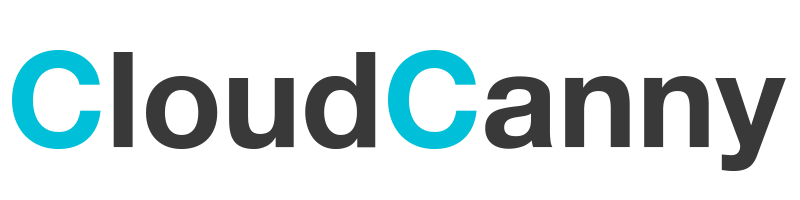
<style>
.page{position:relative;width:800px;height:200px;background:#ffffff}
.page>*{position:absolute;margin:0}
.t1{font:133.3px "HelveticaNeue-Bold";color:#393939}
.t2{font:133.3px "HelveticaNeue-Bold";color:#00bfd8}
</style>
<div class="page">
<p class="t1" style="left:12px;top:50px;width:774px;height:121px"><span class="t2">C</span>loud<span class="t2">C</span>anny</p>
</div>
